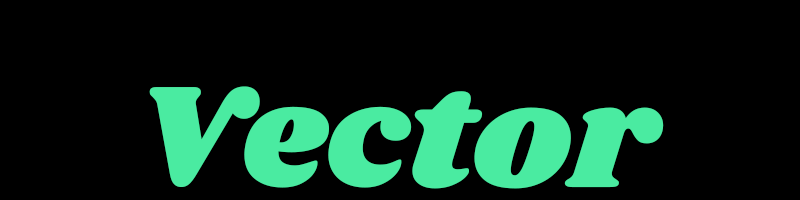
<style>
.page{position:relative;width:800px;height:200px;background:#000000}
.page>*{position:absolute;margin:0}
.t1{font:150px "Shrikhand-Regular";color:#4aeba1}
</style>
<div class="page">
<p class="t1" style="left:149px;top:86px;width:515px;height:103px">Vector</p>
</div>
